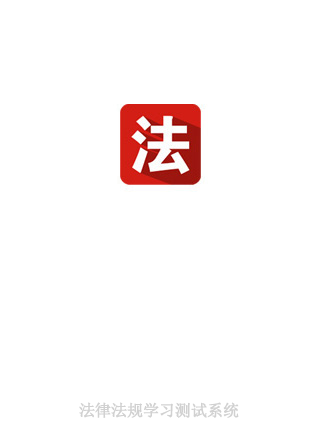
<style>
.page{position:relative;width:320px;height:442px;background:#ffffff}
.page>*{position:absolute;margin:0}
.t1{font:16px "SimSun";color:#d1d1d1;font-weight:bold}
</style>
<div class="page">
<p class="t1" style="left:79px;top:402px;width:160px;height:16px">法律法规学习测试系统</p>
</div>
